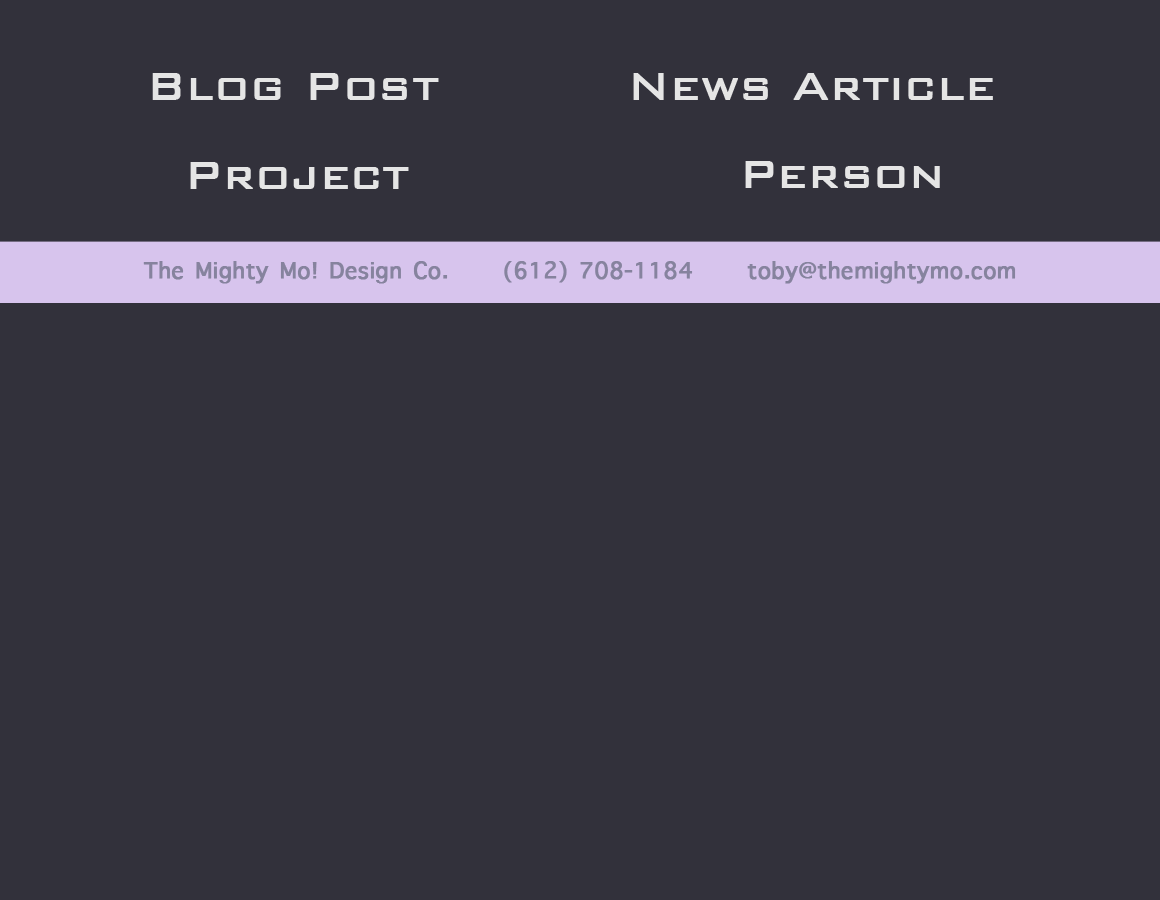
<style>
.page{position:relative;width:1160px;height:900px;background:#32313b}
.page>*{position:absolute;margin:0}
.t1{font:50px "BankGothic-Light";color:#e5e5e5;font-weight:bold}
.t2{font:30px "AppleSymbols";color:#86839e;font-weight:bold}
</style>
<div class="page">
<p class="t1" style="left:152px;top:73px;width:287px;height:27px">Blog Post</p>
<p class="t1" style="left:633px;top:73px;width:360px;height:27px">News Article</p>
<p class="t1" style="left:745px;top:161px;width:195px;height:27px">Person</p>
<p class="t1" style="left:190px;top:162px;width:219px;height:27px">Project</p>
<p class="t2" style="left:143px;top:261px;width:873px;height:23px">The Mighty Mo! Design Co.     (612) 708-1184     toby@themightymo.com</p>
</div>
